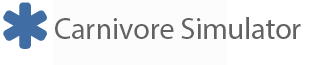
<style>
.page{position:relative;width:327px;height:65px;background:#fcfcfd}
.page>*{position:absolute;margin:0}
.t1{font:30px "MyriadPro-Regular";color:#626163}
</style>
<div class="page">
<p class="t1" style="left:55px;top:17px;width:246px;height:22px">Carnivore Simulator</p>
</div>
